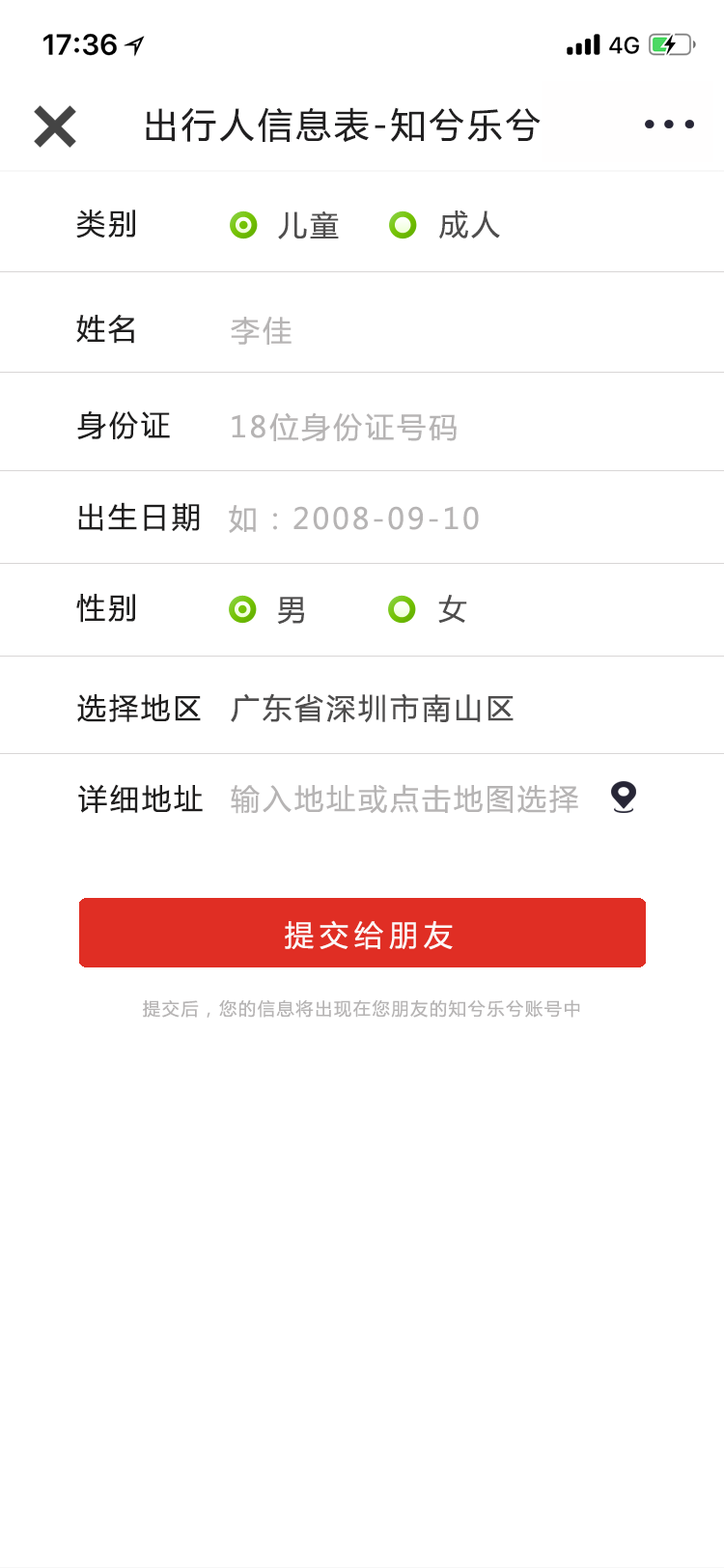
<style>
.page{position:relative;width:724px;height:1568px;background:#ffffff}
.page>*{position:absolute;margin:0}
.t1{font:34.8px "MicrosoftYaHei";letter-spacing:0.1em;color:#201f20}
.t2{font:29px "MicrosoftYaHei";letter-spacing:0.1em;color:#1f1e1e}
.t3{font:29px "MicrosoftYaHei";letter-spacing:0.1em;color:#4e4d4d}
.t4{font:29px "MicrosoftYaHei";letter-spacing:0.1em;color:#b6b4b4}
.t5{font:29px "MicrosoftYaHei";letter-spacing:0.2em;color:#fcf8f8}
.t6{font:17.4px "MicrosoftYaHei";letter-spacing:0.1em;color:#b6b4b4}
</style>
<div class="page">
<p class="t1" style="left:146px;top:107px;width:395px;height:35px">出行人信息表-知兮乐兮</p>
<p class="t2" style="left:76px;top:210px;width:59px;height:28px">类别</p>
<p class="t3" style="left:278px;top:210px;width:61px;height:29px">儿童</p>
<p class="t3" style="left:439px;top:210px;width:61px;height:29px">成人</p>
<p class="t2" style="left:76px;top:315px;width:58px;height:29px">姓名</p>
<p class="t4" style="left:231px;top:316px;width:61px;height:29px">李佳</p>
<p class="t2" style="left:77px;top:410px;width:93px;height:29px">身份证</p>
<p class="t4" style="left:232px;top:412px;width:225px;height:29px">18位身份证号码</p>
<p class="t2" style="left:78px;top:502px;width:122px;height:30px">出生日期</p>
<p class="t4" style="left:229px;top:505px;width:250px;height:28px">如：2008-09-10</p>
<p class="t2" style="left:76px;top:594px;width:59px;height:29px">性别</p>
<p class="t3" style="left:277px;top:597px;width:27px;height:28px">男</p>
<p class="t3" style="left:438px;top:595px;width:29px;height:28px">女</p>
<p class="t2" style="left:77px;top:694px;width:124px;height:28px">选择地区</p>
<p class="t3" style="left:231px;top:693px;width:283px;height:30px">广东省深圳市南山区</p>
<p class="t2" style="left:78px;top:784px;width:125px;height:29px">详细地址</p>
<p class="t4" style="left:231px;top:784px;width:347px;height:30px">输入地址或点击地图选择</p>
<p class="t5" style="left:285px;top:920px;width:168px;height:30px">提交给朋友</p>
<p class="t6" style="left:143px;top:999px;width:437px;height:19px">提交后，您的信息将出现在您朋友的知兮乐兮账号中</p>
</div>
